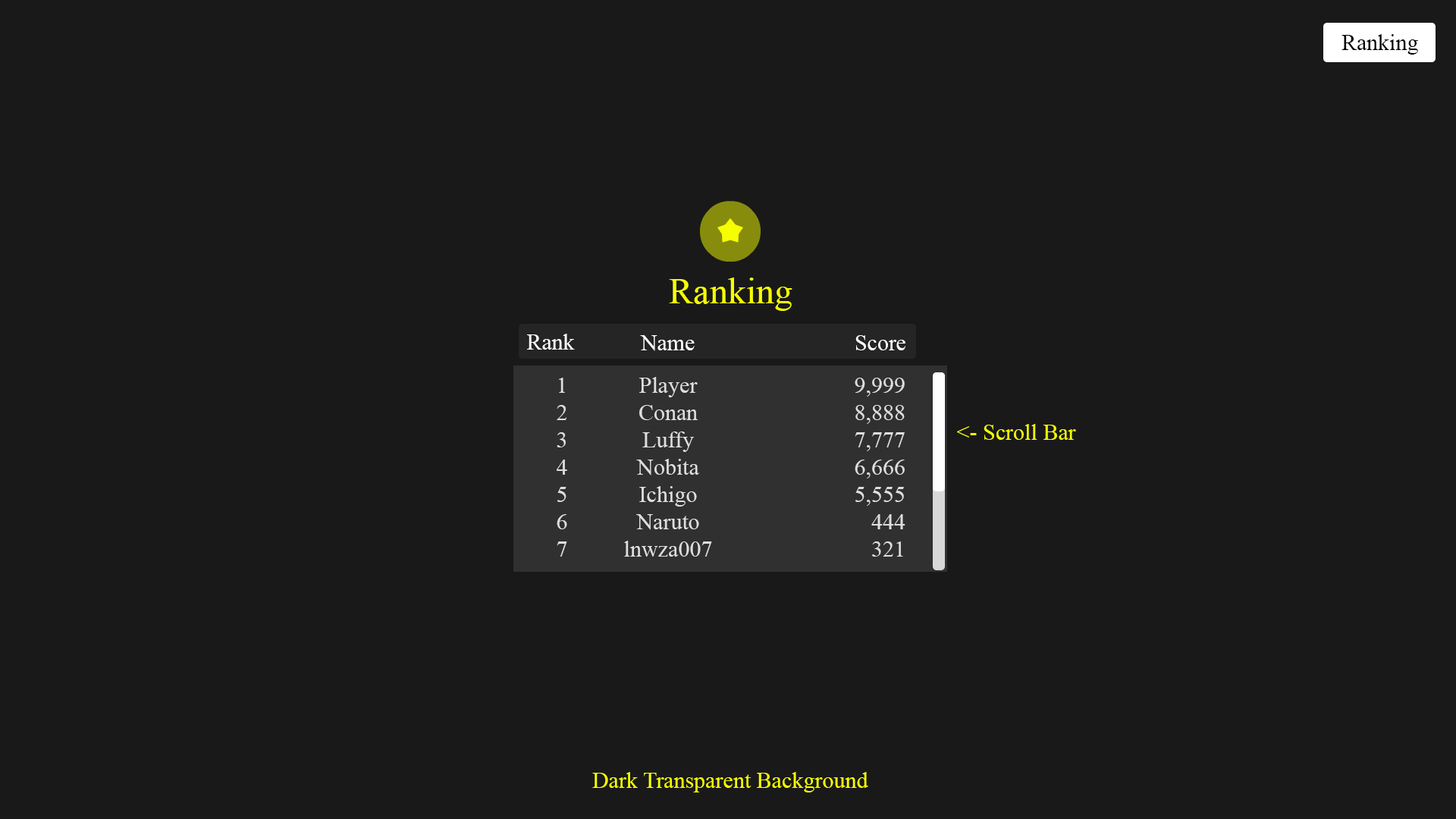
<style>
.page{position:relative;width:1456px;height:819px;background:#191919}
.page>*{position:absolute;margin:0}
.t1{font:22.7px "TimesNewRomanPSMT";color:#000000}
.t2{font:36.4px "TimesNewRomanPSMT";color:#f6ff00}
.t3{font:22.7px "TimesNewRomanPSMT";color:#ffffff}
.t4{font:22.7px/27.3px "TimesNewRomanPSMT";color:#dedede}
.t5{font:22.7px/60.7px "TimesNewRomanPSMT";color:#dedede}
.t6{font:22.7px "TimesNewRomanPSMT";color:#f6ff00}
</style>
<div class="page">
<p class="t1" style="left:1341px;top:34px;width:77px;height:21px">Ranking</p>
<p class="t2" style="left:669px;top:278px;width:123px;height:33px">Ranking</p>
<p class="t3" style="left:527px;top:334px;width:48px;height:16px">Rank</p>
<p class="t3" style="left:640px;top:335px;width:55px;height:16px">Name</p>
<p class="t3" style="left:855px;top:335px;width:50px;height:15px">Score</p>
<p class="t4" style="left:557px;top:378px;width:10px;height:179px;text-align:center">1<br>2<br>3<br>4<br>5<br>6<br>7</p>
<p class="t4" style="left:624px;top:377px;width:88px;height:180px;text-align:center">Player<br>Conan<br>Luffy<br>Nobita<br>Ichigo<br>Naruto<br>lnwza007</p>
<p class="t4" style="left:855px;top:378px;width:50px;height:179px;text-align:right"><span class="t5">9,999</span><br>8,888<br>7,777<br>6,666<br>5,555<br>444<br>321</p>
<p class="t6" style="left:957px;top:424px;width:119px;height:16px">&lt;- Scroll Bar</p>
<p class="t6" style="left:592px;top:772px;width:276px;height:20px">Dark Transparent Background</p>
</div>
